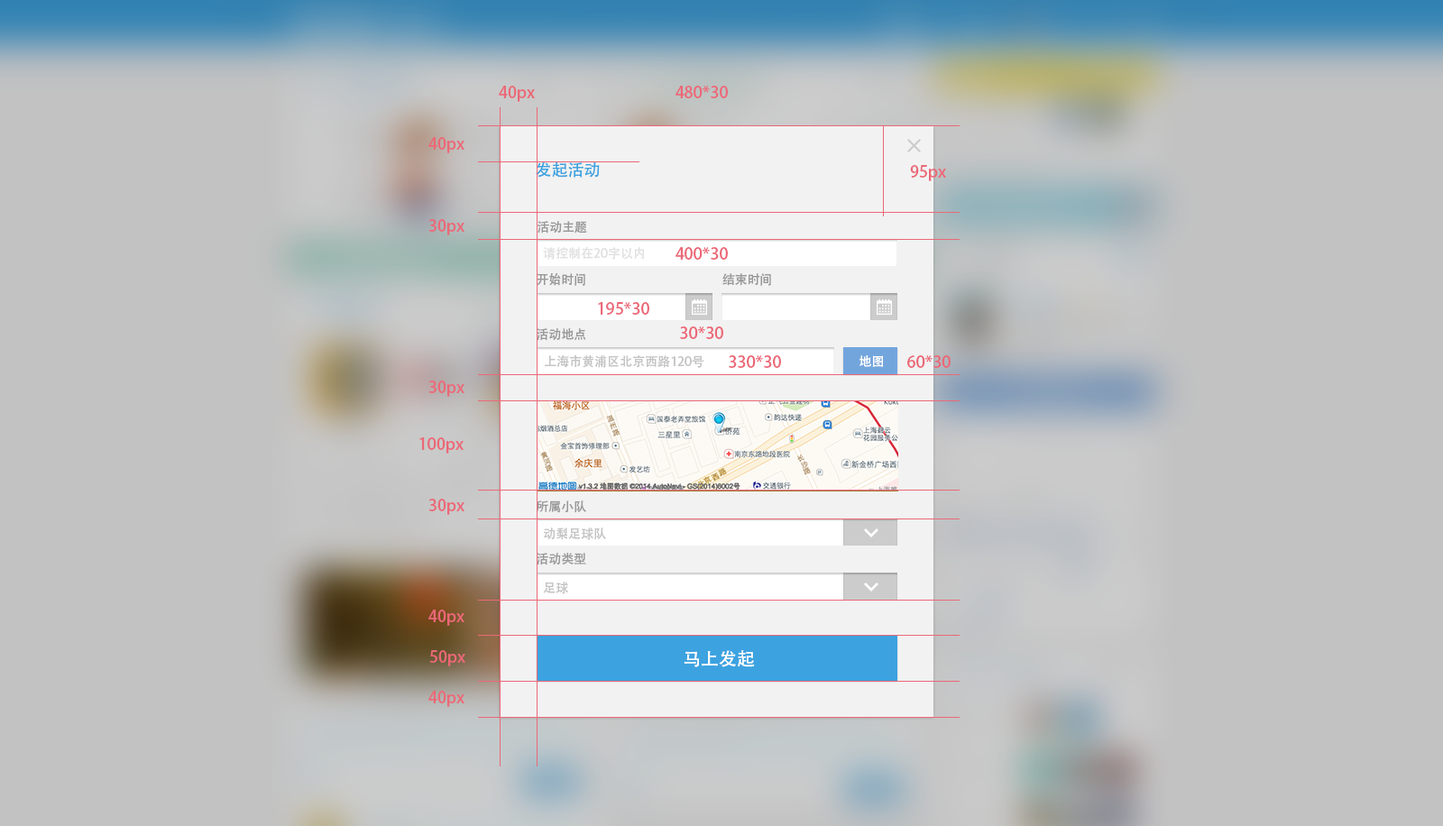
<style>
.page{position:relative;width:1443px;height:826px;background:#c2c2c2}
.page>*{position:absolute;margin:0}
.t1{font:16.2px "AdobeHeitiStd-Regular";color:#eb6877}
.t2{font:16.2px "AdobeHeitiStd-Regular";color:#3ca2e0}
.t3{font:12.6px "AdobeHeitiStd-Regular";color:#999999}
.t4{font:12.6px "AdobeHeitiStd-Regular";color:#cccccc}
.t5{font:12.6px/26.2px "AdobeHeitiStd-Regular";color:#999999}
.t6{font:12.6px/30.7px "AdobeHeitiStd-Regular";color:#999999}
.t7{font:12.6px/24.4px "AdobeHeitiStd-Regular";color:#999999}
.t8{font:12.6px/18.9px "AdobeHeitiStd-Regular";color:#999999}
.t9{font:12.6px/14.4px "AdobeHeitiStd-Regular";color:#999999}
.t10{font:12.6px "AdobeHeitiStd-Regular";color:#c4c4c4}
.t11{font:12.6px "AdobeHeitiStd-Regular";color:#ffffff}
.t12{font:18px "AdobeHeitiStd-Regular";color:#ffffff}
</style>
<div class="page">
<p class="t1" style="left:499px;top:86px;width:36px;height:16px">40px</p>
<p class="t1" style="left:676px;top:86px;width:52px;height:12px">480*30</p>
<p class="t1" style="left:428px;top:137px;width:37px;height:16px">40px</p>
<p class="t2" style="left:536px;top:162px;width:64px;height:16px">发起活动</p>
<p class="t1" style="left:910px;top:165px;width:36px;height:16px">95px</p>
<p class="t1" style="left:428px;top:219px;width:37px;height:16px">30px</p>
<p class="t3" style="left:538px;top:221px;width:49px;height:13px">活动主题</p>
<p class="t4" style="left:543px;top:246px;width:102px;height:14px;opacity:0.62">请控制在20字以内</p>
<p class="t1" style="left:676px;top:247px;width:52px;height:13px">400*30</p>
<p class="t5" style="left:536px;top:273px;width:235px;height:293px"><span class="t6"><br><br></span>开始时间                                                结束时间<br><br><span class="t7">活动地点<br><br><br><br><br><br></span><span class="t8">所属小队<br><br><br></span><span class="t9">活动类型</span></p>
<p class="t1" style="left:598px;top:302px;width:51px;height:13px">195*30</p>
<p class="t1" style="left:680px;top:327px;width:43px;height:12px">30*30</p>
<p class="t10" style="left:545px;top:354px;width:159px;height:14px">上海市黄浦区北京西路120号</p>
<p class="t1" style="left:729px;top:355px;width:52px;height:13px">330*30</p>
<p class="t11" style="left:860px;top:355px;width:24px;height:12px">地图</p>
<p class="t1" style="left:907px;top:355px;width:44px;height:13px">60*30</p>
<p class="t1" style="left:428px;top:381px;width:37px;height:16px">30px</p>
<p class="t1" style="left:419px;top:437px;width:45px;height:17px">100px</p>
<p class="t1" style="left:428px;top:499px;width:37px;height:16px">30px</p>
<p class="t10" style="left:544px;top:528px;width:62px;height:12px">动梨足球队</p>
<p class="t10" style="left:543px;top:582px;width:25px;height:12px">足球</p>
<p class="t1" style="left:428px;top:610px;width:37px;height:16px">40px</p>
<p class="t1" style="left:429px;top:650px;width:36px;height:17px">50px</p>
<p class="t12" style="left:684px;top:650px;width:71px;height:17px">马上发起</p>
<p class="t1" style="left:428px;top:691px;width:37px;height:16px">40px</p>
</div>
